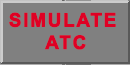
<style>
.page{position:relative;width:130px;height:65px;background:#808080}
.page>*{position:absolute;margin:0}
.t1{font:18.7px "Arial-BoldMT";letter-spacing:0.075em;color:#df0024;font-weight:bold}
</style>
<div class="page">
<p class="t1" style="left:9px;top:12px;width:107px;height:38px;text-align:center">SIMULATE<br> ATC</p>
</div>
